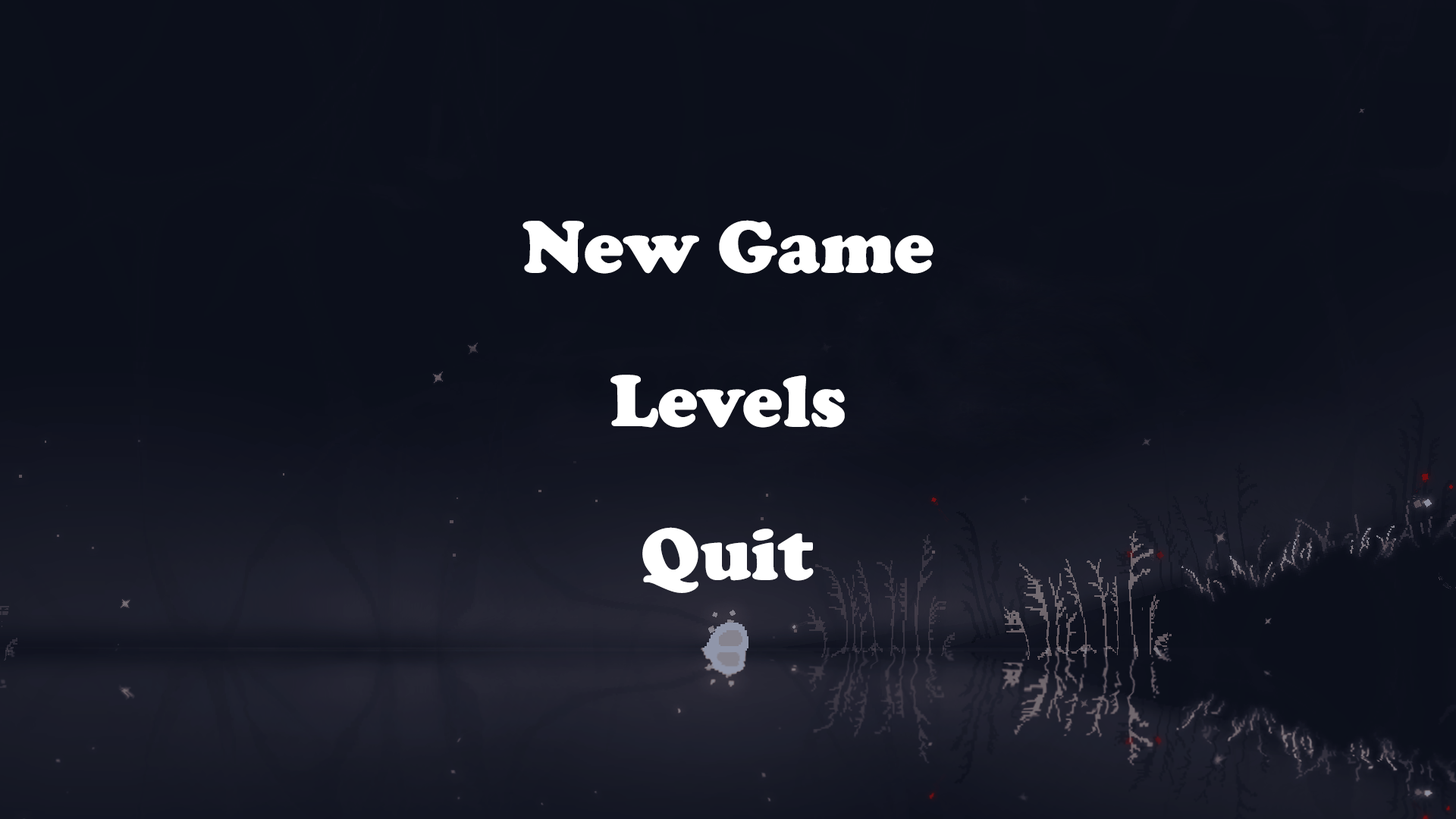
<style>
.page{position:relative;width:1456px;height:819px;background:#0c0f1b}
.page>*{position:absolute;margin:0}
.t1{font:75.8px "CooperBlack";color:#ffffff}
</style>
<div class="page">
<p class="t1" style="left:522px;top:220px;width:411px;height:54px">New Game</p>
<p class="t1" style="left:610px;top:375px;width:235px;height:53px">Levels</p>
<p class="t1" style="left:642px;top:527px;width:172px;height:66px">Quit</p>
</div>
